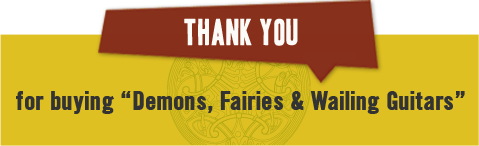
<style>
.page{position:relative;width:479px;height:146px;background:#dfc022}
.page>*{position:absolute;margin:0}
.t1{font:32.6px "HeadlineOneHPLHS";letter-spacing:0.025em;color:#fcfbf7}
.t2{font:26.5px "SlimSansSerif-Bold";letter-spacing:0.02em;color:#333333}
</style>
<div class="page">
<p class="t1" style="left:184px;top:18px;width:114px;height:28px">Thank you</p>
<p class="t2" style="left:16px;top:91px;width:449px;height:23px">for buying “Demons, Fairies &amp; Wailing Guitars”</p>
</div>
